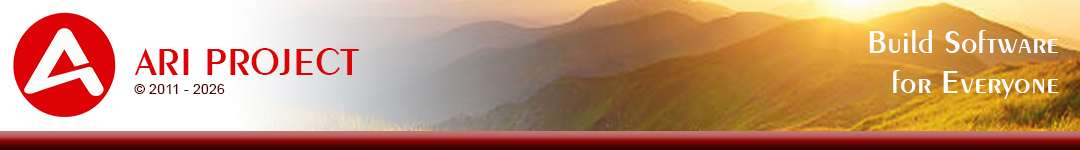
<style>
.page{position:relative;width:1080px;height:150px}
.page>*{position:absolute;margin:0}
.t1{font:33.4px "Exotic350BT-DemiBold";color:#ffffff}
.t2{font:40.4px "Exotic350BT-DemiBold";color:#dd0205}
.t3{font:14.4px "ArialMT";color:#460202}
</style>
<div class="page">
<p class="t1" style="left:869px;top:30px;width:189px;height:69px;text-align:right">Build Software<br>for Everyone</p>
<p class="t2" style="left:134px;top:48px;width:225px;height:27px">ARI PROJECT</p>
<p class="t3" style="left:134px;top:84px;width:91px;height:10px">© 2011 - 2026</p>
</div>
